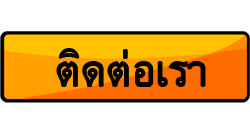
<style>
.page{position:relative;width:250px;height:135px;background:#ffffff}
.page>*{position:absolute;margin:0}
.t1{font:60px "BrowalliaUPC";color:#000000}
</style>
<div class="page">
<p class="t1" style="left:57px;top:49px;width:148px;height:37px">ติดต่อเรา</p>
</div>
